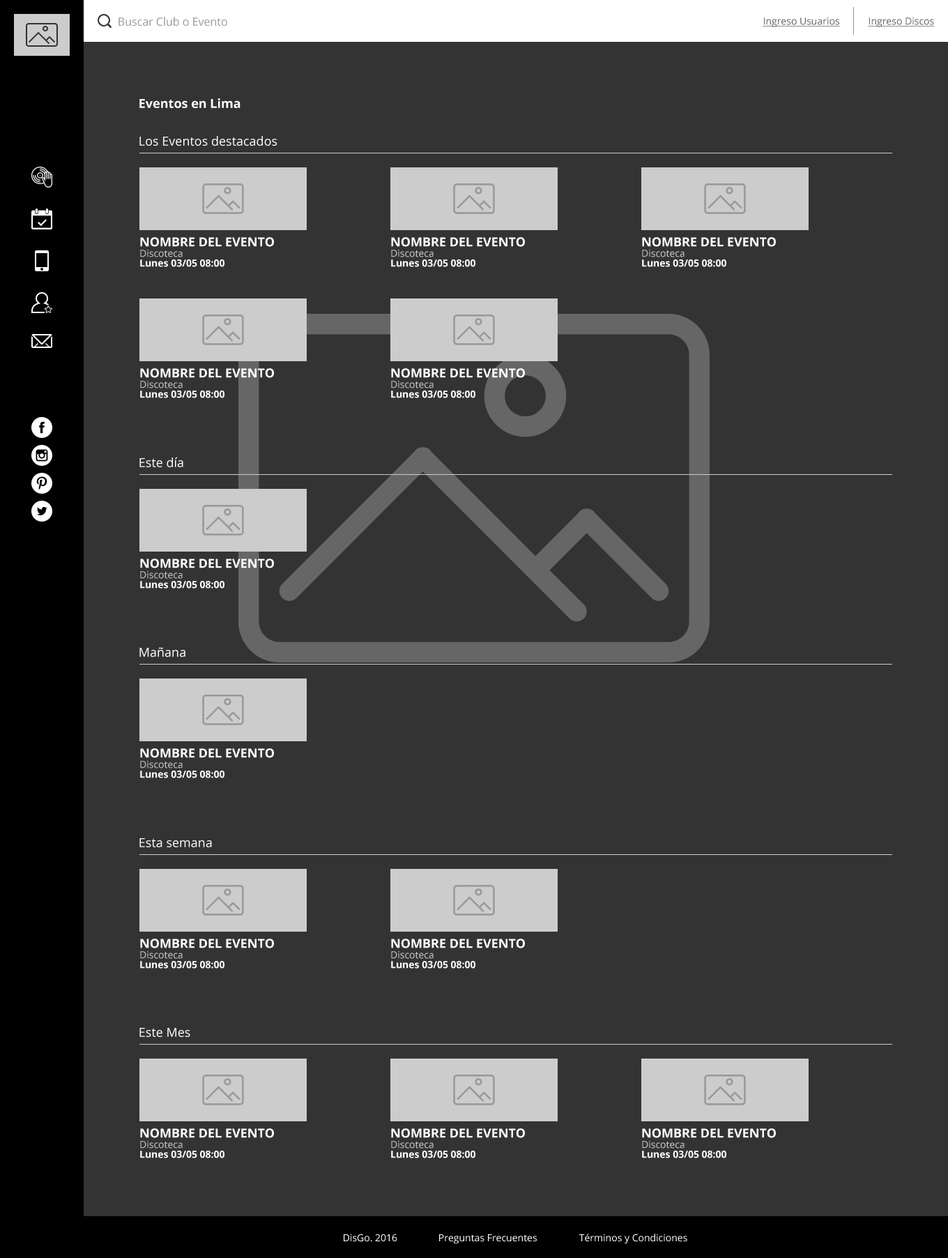
<style>
.page{position:relative;width:948px;height:1258px;background:#333333}
.page>*{position:absolute;margin:0}
.t1{font:11.2px "OpenSans";color:#999999}
.t2{font:9.8px "OpenSans";color:#666666;text-decoration:underline}
.t3{font:12.5px "OpenSans-Bold";color:#ffffff}
.t4{font:12.5px "OpenSans";color:#ffffff}
.t5{font:12.5px "OpenSans-Bold";color:#ffffff;text-transform:uppercase}
.t6{font:9.8px "OpenSans";color:#cccccc}
.t7{font:9.8px "OpenSans-Bold";color:#ffffff}
.t8{font:9.8px "OpenSans";color:#ffffff}
</style>
<div class="page">
<p class="t1" style="left:119px;top:17px;width:108px;height:9px">Buscar Club o Evento</p>
<p class="t2" style="left:763px;top:17px;width:77px;height:10px">Ingreso Usuarios</p>
<p class="t2" style="left:868px;top:17px;width:67px;height:10px">Ingreso Discos</p>
<p class="t3" style="left:139px;top:98px;width:102px;height:10px">Eventos en Lima</p>
<p class="t4" style="left:139px;top:136px;width:138px;height:10px">Los Eventos destacados</p>
<p class="t5" style="left:140px;top:237px;width:134px;height:10px">Nombre del evento</p>
<p class="t5" style="left:391px;top:237px;width:134px;height:10px">Nombre del evento</p>
<p class="t5" style="left:642px;top:237px;width:134px;height:10px">Nombre del evento</p>
<p class="t6" style="left:140px;top:250px;width:43px;height:7px">Discoteca</p>
<p class="t6" style="left:391px;top:250px;width:43px;height:7px">Discoteca</p>
<p class="t6" style="left:642px;top:250px;width:43px;height:7px">Discoteca</p>
<p class="t7" style="left:140px;top:259px;width:84px;height:8px">Lunes 03/05 08:00</p>
<p class="t7" style="left:391px;top:259px;width:84px;height:8px">Lunes 03/05 08:00</p>
<p class="t7" style="left:642px;top:259px;width:84px;height:8px">Lunes 03/05 08:00</p>
<p class="t5" style="left:140px;top:368px;width:134px;height:10px">Nombre del evento</p>
<p class="t5" style="left:391px;top:368px;width:134px;height:10px">Nombre del evento</p>
<p class="t6" style="left:140px;top:381px;width:43px;height:7px">Discoteca</p>
<p class="t6" style="left:391px;top:381px;width:43px;height:7px">Discoteca</p>
<p class="t7" style="left:140px;top:390px;width:84px;height:8px">Lunes 03/05 08:00</p>
<p class="t7" style="left:391px;top:390px;width:84px;height:8px">Lunes 03/05 08:00</p>
<p class="t4" style="left:139px;top:457px;width:44px;height:10px">Este día</p>
<p class="t5" style="left:140px;top:558px;width:134px;height:10px">Nombre del evento</p>
<p class="t7" style="left:140px;top:581px;width:84px;height:7px">Lunes 03/05 08:00</p>
<p class="t6" style="left:140px;top:571px;width:43px;height:8px">Discoteca</p>
<p class="t4" style="left:139px;top:647px;width:46px;height:10px">Mañana</p>
<p class="t5" style="left:140px;top:748px;width:134px;height:10px">Nombre del evento</p>
<p class="t6" style="left:140px;top:761px;width:43px;height:7px">Discoteca</p>
<p class="t7" style="left:140px;top:770px;width:84px;height:8px">Lunes 03/05 08:00</p>
<p class="t4" style="left:139px;top:838px;width:73px;height:9px">Esta semana</p>
<p class="t5" style="left:140px;top:938px;width:134px;height:10px">Nombre del evento</p>
<p class="t5" style="left:391px;top:938px;width:134px;height:10px">Nombre del evento</p>
<p class="t6" style="left:140px;top:951px;width:43px;height:8px">Discoteca</p>
<p class="t6" style="left:391px;top:951px;width:43px;height:8px">Discoteca</p>
<p class="t7" style="left:140px;top:961px;width:84px;height:7px">Lunes 03/05 08:00</p>
<p class="t7" style="left:391px;top:961px;width:84px;height:7px">Lunes 03/05 08:00</p>
<p class="t4" style="left:139px;top:1028px;width:51px;height:9px">Este Mes</p>
<p class="t5" style="left:140px;top:1128px;width:134px;height:10px">Nombre del evento</p>
<p class="t5" style="left:391px;top:1128px;width:134px;height:10px">Nombre del evento</p>
<p class="t5" style="left:642px;top:1128px;width:134px;height:10px">Nombre del evento</p>
<p class="t6" style="left:140px;top:1141px;width:43px;height:7px">Discoteca</p>
<p class="t6" style="left:391px;top:1141px;width:43px;height:7px">Discoteca</p>
<p class="t6" style="left:642px;top:1141px;width:43px;height:7px">Discoteca</p>
<p class="t7" style="left:140px;top:1150px;width:84px;height:8px">Lunes 03/05 08:00</p>
<p class="t7" style="left:391px;top:1150px;width:84px;height:8px">Lunes 03/05 08:00</p>
<p class="t7" style="left:642px;top:1150px;width:84px;height:8px">Lunes 03/05 08:00</p>
<p class="t8" style="left:344px;top:1233px;width:53px;height:9px">DisGo. 2016</p>
<p class="t8" style="left:439px;top:1234px;width:98px;height:10px">Preguntas Frecuentes</p>
<p class="t8" style="left:579px;top:1233px;width:108px;height:11px">Términos y Condiciones</p>
</div>
